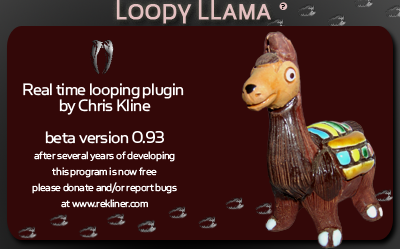
<style>
.page{position:relative;width:400px;height:249px;background:#330808}
.page>*{position:absolute;margin:0}
.t1{font:24px "SimianDisplay-OrangutanAlt";color:#e4c0c0;font-weight:bold}
.t2{font:8px "SimianText-Orangutan";letter-spacing:-0.05em;color:#000000}
.t3{font:12px/16px "SimianText-Orangutan";letter-spacing:-0.025em;color:#ffffff}
.t4{font:18.7px/16px "SimianText-Orangutan";letter-spacing:-0.025em;color:#ffffff}
</style>
<div class="page">
<p class="t1" style="left:116px;top:0px;width:155px;height:24px">LOOPY LLAMA</p>
<p class="t2" style="left:281px;top:4px;width:4px;height:5px">?</p>
<p class="t3" style="left:23px;top:83px;width:161px;height:125px;text-align:center"><span class="t4">Real time looping plugin <br>by Chris Kline<br><br>beta version 0.93<br></span>after several years of developing<br>this program is now free<br>please donate and/or report bugs<br>at www.rekliner.com</p>
</div>
